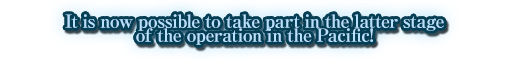
<style>
.page{position:relative;width:510px;height:59px;background:#ffffff}
.page>*{position:absolute;margin:0}
.t1{font:18px/14px "RyuminPro-ExBold";letter-spacing:-0.04em;color:#b9e0ff}
</style>
<div class="page">
<p class="t1" style="left:65px;top:14px;width:379px;height:31px;text-align:center">It is now possible to take part in the latter stage<br>of the operation in the Pacific!</p>
</div>
